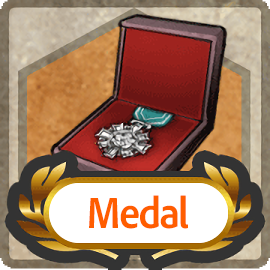
<style>
.page{position:relative;width:270px;height:270px}
.page>*{position:absolute;margin:0}
.t1{font:45px "AdobeClean-Bold";letter-spacing:-0.04em;color:#ff5d00;scale:0.9 1}
</style>
<div class="page">
<p class="t1" style="left:89px;top:195px;width:99px;height:34px">Medal</p>
</div>
